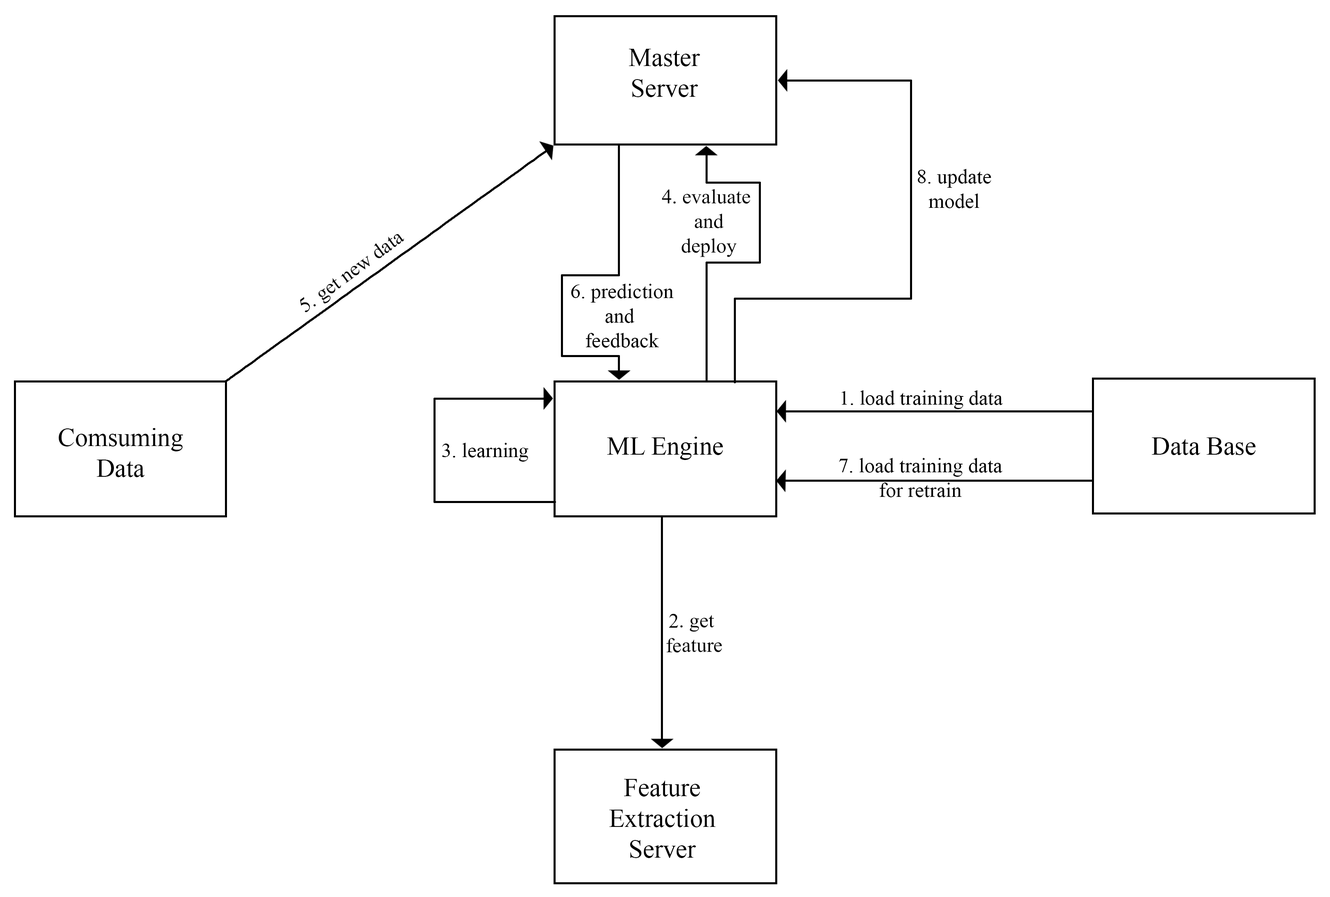
<style>
.page{position:relative;width:1330px;height:897px;background:#ffffff}
.page>*{position:absolute;margin:0}
.t1{font:25.6px "TimesNewRomanPSMT";color:#000000}
.t2{font:4.9px "TimesNewRomanPSMT";color:#000000}
.t3{font:20.5px "TimesNewRomanPSMT";color:#000000}
</style>
<div class="page">
<p class="t1" style="left:629px;top:49px;width:71px;height:48px;text-align:center">Master<br>Server</p>
<p class="t2" style="left:918px;top:169px;width:73px;height:39px;text-align:center">8. update<br>model</p>
<p class="t3" style="left:662px;top:189px;width:88px;height:68px;text-align:center">4. evaluate <br>and<br>deploy</p>
<p class="t3" style="left:300px;top:234px;width:104px;height:78px;rotate:-36deg">5. get new data</p>
<p class="t2" style="left:571px;top:284px;width:103px;height:63px;text-align:center">6. prediction<br>and <br>feedback</p>
<p class="t3" style="left:842px;top:390px;width:161px;height:19px">1. load training data</p>
<p class="t1" style="left:59px;top:428px;width:124px;height:49px;text-align:center">Comsuming<br>Data</p>
<p class="t1" style="left:607px;top:436px;width:116px;height:24px">ML Engine</p>
<p class="t1" style="left:1152px;top:437px;width:104px;height:18px">Data Base</p>
<p class="t3" style="left:442px;top:443px;width:87px;height:18px">3. learning</p>
<p class="t3" style="left:839px;top:458px;width:164px;height:39px;text-align:center">7. load training data<br>for retrain</p>
<p class="t3" style="left:666px;top:613px;width:56px;height:39px;text-align:center">2. get <br>feature</p>
<p class="t1" style="left:609px;top:779px;width:107px;height:79px;text-align:center">Feature<br>Extraction<br>Server</p>
</div>
